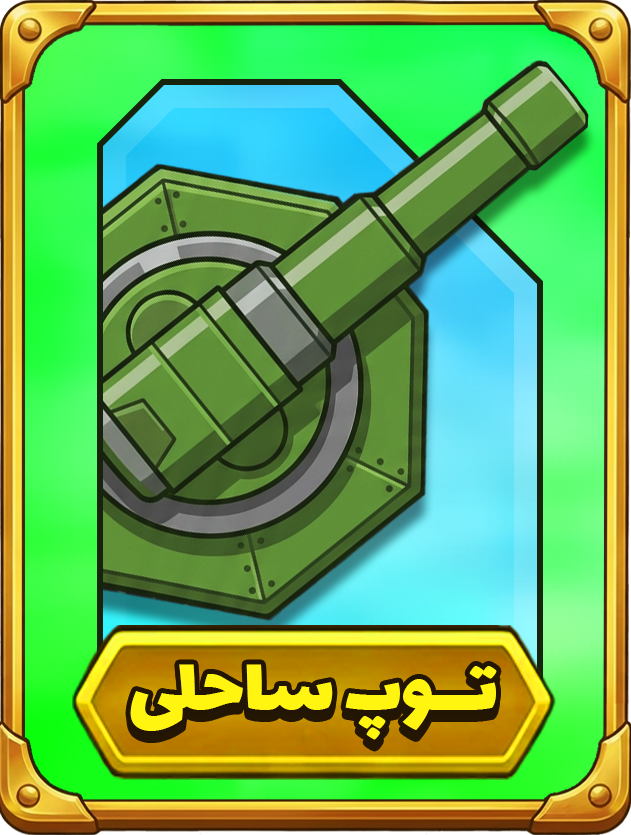
<style>
.page{position:relative;width:631px;height:835px}
.page>*{position:absolute;margin:0}
.t1{font:80.8px "Lalezar-Regular";letter-spacing:-0.01em;color:#fff621;text-transform:uppercase;scale:1.1 1}
</style>
<div class="page">
<p class="t1" style="left:130px;top:664px;width:367px;height:76px">تــوپ ساحلی</p>
</div>
